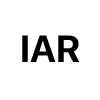
<style>
.page{position:relative;width:100px;height:100px;background:#ffffff}
.page>*{position:absolute;margin:0}
.t1{font:37.5px "SFProDisplay-Bold";color:#000000}
</style>
<div class="page">
<p class="t1" style="left:22px;top:35px;width:58px;height:27px">IAR</p>
</div>
